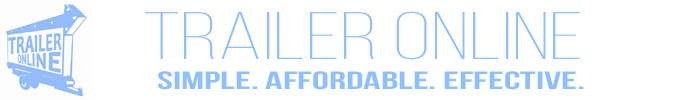
<style>
.page{position:relative;width:700px;height:100px;background:#ffffff}
.page>*{position:absolute;margin:0}
.t1{font:67px "BebasNeueLight";color:#8ec0ff;scale:1.49 1}
.t2{font:25px "BebasNeueBold";color:#8ec0ff;scale:1.71 1}
</style>
<div class="page">
<p class="t1" style="left:145px;top:11px;width:435px;height:49px">Trailer Online</p>
<p class="t2" style="left:158px;top:71px;width:426px;height:19px">Simple. Affordable. Effective.</p>
</div>
